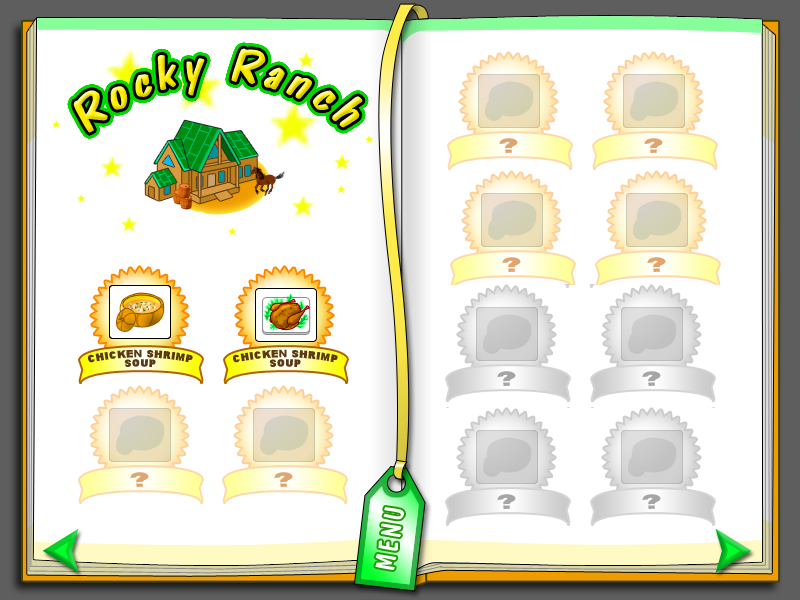
<style>
.page{position:relative;width:800px;height:600px;background:#ffffff}
.page>*{position:absolute;margin:0}
.t1{font:48.9px "DomCasualBT-Regular";letter-spacing:0.095em;font-style:italic}
.t2{font:9.4px/9.4px "Arial-Black";letter-spacing:0.045em;color:#5b3714;text-transform:uppercase}
.t3{font:18.5px "Arial-Black";letter-spacing:0.045em;color:#dfa56c;text-transform:uppercase}
.t4{font:28.1px "DomCasualBT-Regular";letter-spacing:0.09em;color:#ffffff;font-variant:small-caps}
</style>
<div class="page">
<p class="t1" style="left:73px;top:48px;width:290px;height:85px;rotate:-1deg">Rocky Ranch</p>
<p class="t2" style="left:233px;top:349px;width:105px;height:18px;text-align:center">chicken shrimp<br>soup</p>
<p class="t3" style="left:130px;top:472px;width:19px;height:15px">?</p>
<p class="t4" style="left:375px;top:507px;width:29px;height:63px;rotate:-80deg">MENU</p>
</div>
